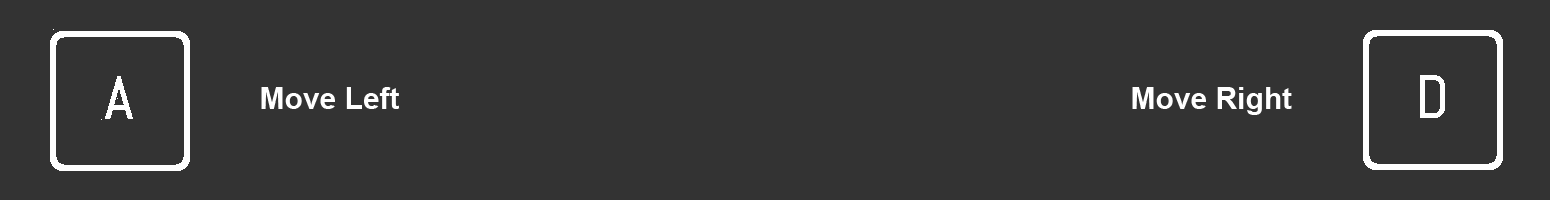
<style>
.page{position:relative;width:1550px;height:200px;background:#333333}
.page>*{position:absolute;margin:0}
.t1{font:30px "Arial-BoldMT";color:#ffffff}
</style>
<div class="page">
<p class="t1" style="left:261px;top:87px;width:139px;height:22px">Move Left</p>
<p class="t1" style="left:1132px;top:87px;width:160px;height:28px">Move Right</p>
</div>
